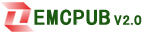
<style>
.page{position:relative;width:142px;height:34px;background:#ffffff}
.page>*{position:absolute;margin:0}
.t1{font:21.3px "SimHei";letter-spacing:0.1em;color:#1c5a12;font-weight:bold;scale:1.1 1}
.t2{font:13.3px "SimHei";letter-spacing:0.1em;color:#1c5a12;font-weight:bold;scale:1.1 1}
</style>
<div class="page">
<p class="t1" style="left:34px;top:9px;width:108px;height:16px">EMCPUB <span class="t2">V2.0</span></p>
</div>
